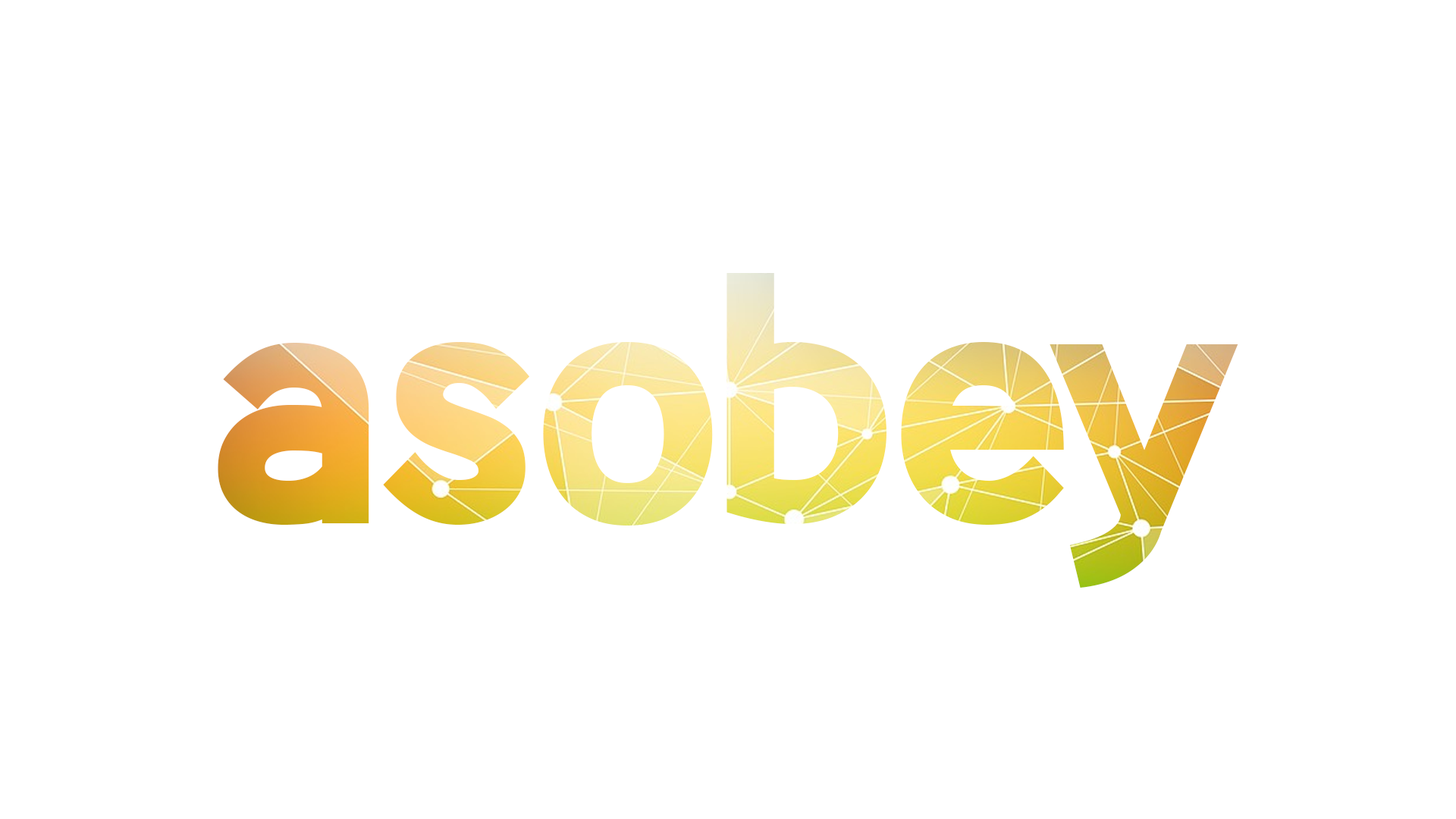
<style>
.page{position:relative;width:1456px;height:819px;background:#ffffff}
.page>*{position:absolute;margin:0}
.t1{font:357.9px "BerlinX-Bold"}
</style>
<div class="page">
<p class="t1" style="left:218px;top:273px;width:1020px;height:315px">asobey</p>
</div>
